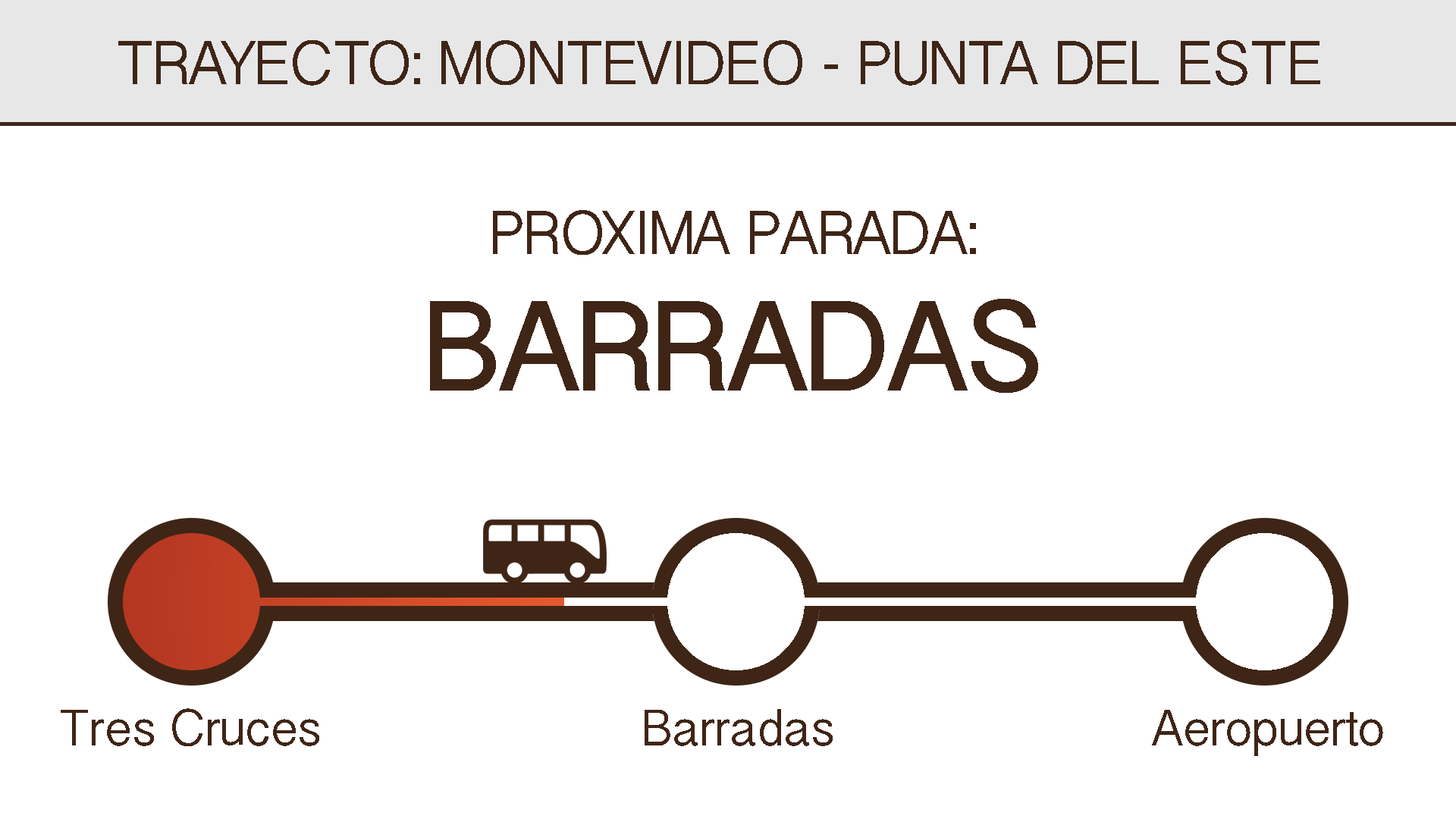
<style>
.page{position:relative;width:1456px;height:819px;background:#ffffff}
.page>*{position:absolute;margin:0}
.t1{font:54.6px "BanglaSangamMN";letter-spacing:-0.025em;color:#3f2516}
.t2{font:113.7px "BanglaSangamMN-Bold";letter-spacing:-0.025em;color:#3f2516}
.t3{font:45.5px "BanglaSangamMN";letter-spacing:-0.025em;color:#3f2516}
</style>
<div class="page">
<p class="t1" style="left:118px;top:40px;width:1202px;height:46px">TRAYECTO: MONTEVIDEO - PUNTA DEL ESTE</p>
<p class="t1" style="left:430px;top:210px;width:608px;height:183px;text-align:center">PROXIMA PARADA:<br><span class="t2">BARRADAS</span></p>
<p class="t3" style="left:61px;top:708px;width:258px;height:38px">Tres Cruces</p>
<p class="t3" style="left:645px;top:709px;width:188px;height:37px">Barradas</p>
<p class="t3" style="left:1152px;top:710px;width:231px;height:46px">Aeropuerto</p>
</div>
